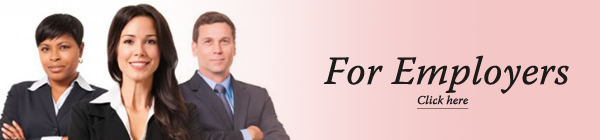
<style>
.page{position:relative;width:600px;height:140px}
.page>*{position:absolute;margin:0}
.t1{font:40px "WarnockPro-ItCapt";color:#1d1a1a}
.t2{font:12px "WarnockPro-ItCapt";color:#1d1a1a;text-decoration:underline}
</style>
<div class="page">
<p class="t1" style="left:323px;top:55px;width:246px;height:39px">For Employers</p>
<p class="t2" style="left:417px;top:95px;width:52px;height:14px">Click here</p>
</div>
